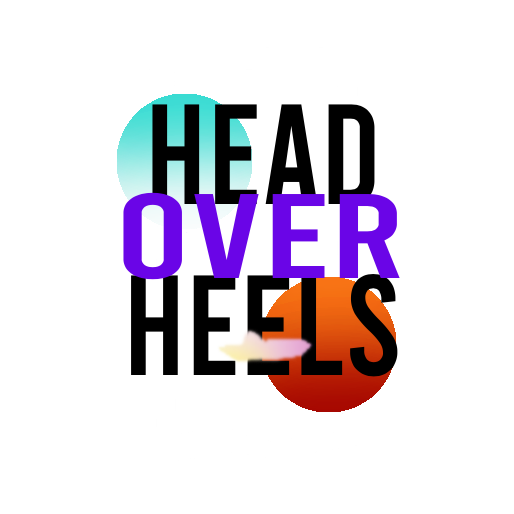
<style>
.page{position:relative;width:514px;height:514px;background:#ffffff}
.page>*{position:absolute;margin:0}
.t1{font:142.2px "Bebas-Regular";color:#000000}
.t2{font:142.2px "BebasNeueRegular";color:#bf0404}
.t3{font:120px "Bebas-Regular";color:#6a05e7;scale:1.43 1}
</style>
<div class="page">
<p class="t1" style="left:131px;top:104px;width:267px;height:273px"><span class="t2"> </span>head<br>heels</p>
<p class="t3" style="left:123px;top:192px;width:277px;height:88px">Over</p>
</div>
